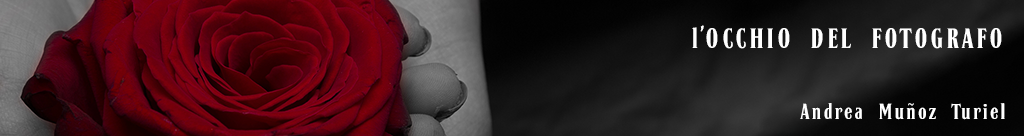
<style>
.page{position:relative;width:1024px;height:136px}
.page>*{position:absolute;margin:0}
.t1{font:36px "JasperDaniels";color:#ffffff}
.t2{font:28px "JasperDaniels";color:#ffffff}
</style>
<div class="page">
<p class="t1" style="left:692px;top:25px;width:310px;height:24px">l’OCCHIO DEL FOTOGRAFO</p>
<p class="t2" style="left:800px;top:103px;width:205px;height:17px">Andrea Muñoz Turiel</p>
</div>
